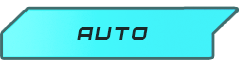
<style>
.page{position:relative;width:250px;height:60px;background:#ffffff}
.page>*{position:absolute;margin:0}
.t1{font:18px "UnitedKingdom";letter-spacing:0.13em;color:#1b2929;font-style:italic}
</style>
<div class="page">
<p class="t1" style="left:77px;top:27px;width:71px;height:13px">Auto</p>
</div>
